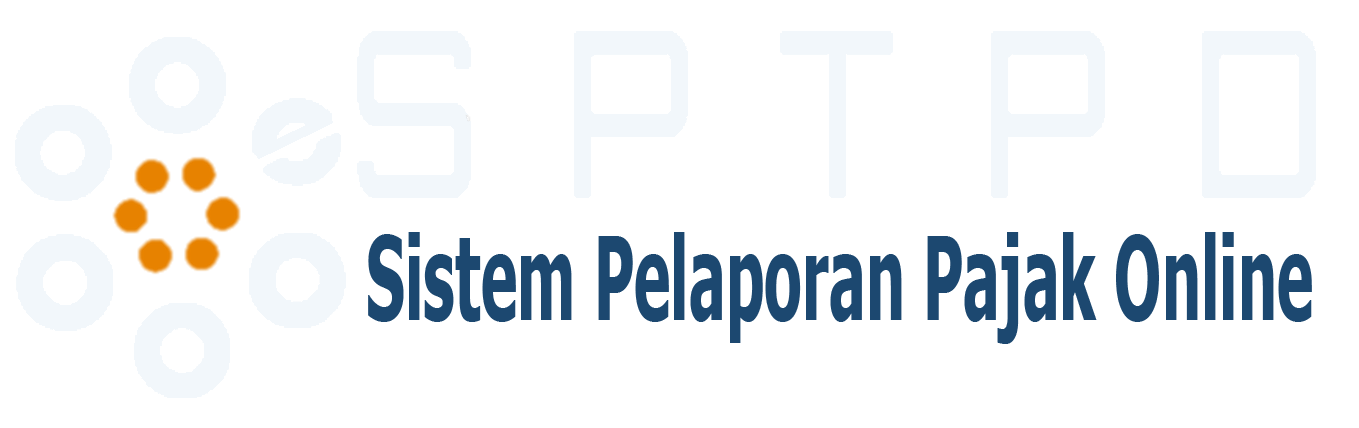
<style>
.page{position:relative;width:1359px;height:428px;background:#ffffff}
.page>*{position:absolute;margin:0}
.t1{font:116.4px "Tahoma-Bold";color:#1c4870;scale:0.53 1}
</style>
<div class="page">
<p class="t1" style="left:368px;top:232px;width:944px;height:112px">Sistem Pelaporan Pajak Online</p>
</div>
